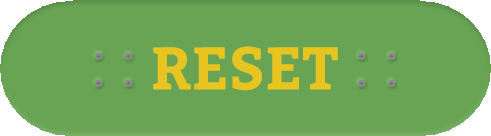
<style>
.page{position:relative;width:491px;height:136px;background:#68a454}
.page>*{position:absolute;margin:0}
.t1{font:60px "Bitter-Bold";color:#e7c420}
</style>
<div class="page">
<p class="t1" style="left:153px;top:46px;width:185px;height:45px">RESET</p>
</div>
